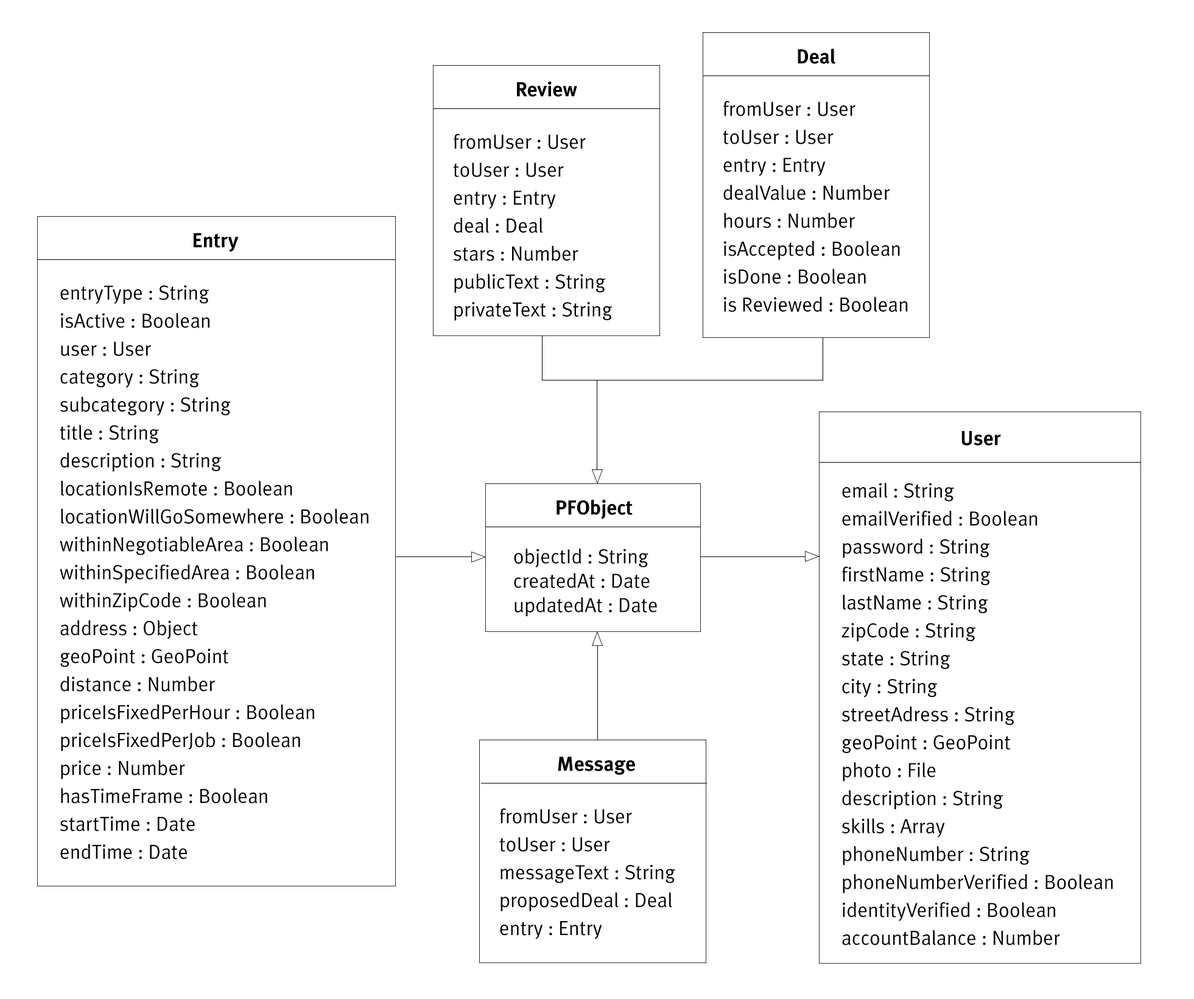
<style>
.page{position:relative;width:1194px;height:999px;background:#ffffff}
.page>*{position:absolute;margin:0}
.t1{font:20.3px/28px "MetaPlus-Roman";color:#000000}
.t2{font:20.3px "MetaPlus-Bold";color:#000000}
.t3{font:20.3px "MetaPlus-Roman";color:#000000}
</style>
<div class="page">
<p class="t1" style="left:723px;top:48px;width:185px;height:264px;text-align:center"><span class="t2">Deal<br><br></span>fromUser : User<br>toUser : User<br>entry : Entry<br>dealValue : Number<br>hours : Number<br>isAccepted : Boolean<br>isDone : Boolean<br>is Reviewed : Boolean</p>
<p class="t1" style="left:453px;top:81px;width:159px;height:240px;text-align:center"><span class="t2">Review<br><br></span>fromUser : User<br>toUser : User<br>entry : Entry<br>deal : Deal<br>stars : Number<br>publicText : String<br>privateText : String</p>
<p class="t1" style="left:60px;top:233px;width:308px;height:627px;text-align:center"><span class="t2">Entry<br><br></span>entryType : String<br>isActive : Boolean<br>user : User<br>category : String<br>subcategory : String<br>title : String<br>description : String<br>locationIsRemote : Boolean<br>locationWillGoSomewhere : Boolean<br>withinNegotiableArea : Boolean<br>withinSpecifiedArea : Boolean<br>withinZipCode : Boolean<br>address : Object<br>geoPoint : GeoPoint<br>distance : Number<br>priceIsFixedPerHour : Boolean<br>priceIsFixedPerJob : Boolean<br>price : Number<br>hasTimeFrame : Boolean<br>startTime : Date<br>endTime : Date</p>
<p class="t1" style="left:841px;top:431px;width:272px;height:514px;text-align:center"><span class="t2">User<br><br></span>email : String<br>emailVerified : Boolean<br>password : String<br>firstName : String<br>lastName : String<br>zipCode : String<br>state : String<br>city : String<br>streetAdress : String<br>geoPoint : GeoPoint<br>photo : File<br>description : String<br>skills : Array<br>phoneNumber : String<br>phoneNumberVerified : Boolean<br>identityVerified : Boolean<br>accountBalance : Number</p>
<p class="t3" style="left:514px;top:499px;width:143px;height:118px;text-align:center"><span class="t2">PFObject<br><br></span>objectId : String<br>createdAt : Date<br>updatedAt : Date</p>
<p class="t1" style="left:499px;top:757px;width:176px;height:182px;text-align:center"><span class="t2">Message<br><br></span>fromUser : User<br>toUser : User<br>messageText : String<br>proposedDeal : Deal<br>entry : Entry</p>
</div>
